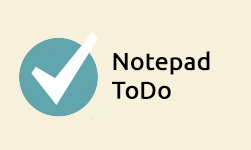
<style>
.page{position:relative;width:251px;height:150px;background:#f7f1db}
.page>*{position:absolute;margin:0}
.t1{font:24px "Ubuntu";color:#000000;font-weight:bold}
</style>
<div class="page">
<p class="t1" style="left:112px;top:51px;width:98px;height:48px">Notepad<br>ToDo</p>
</div>
